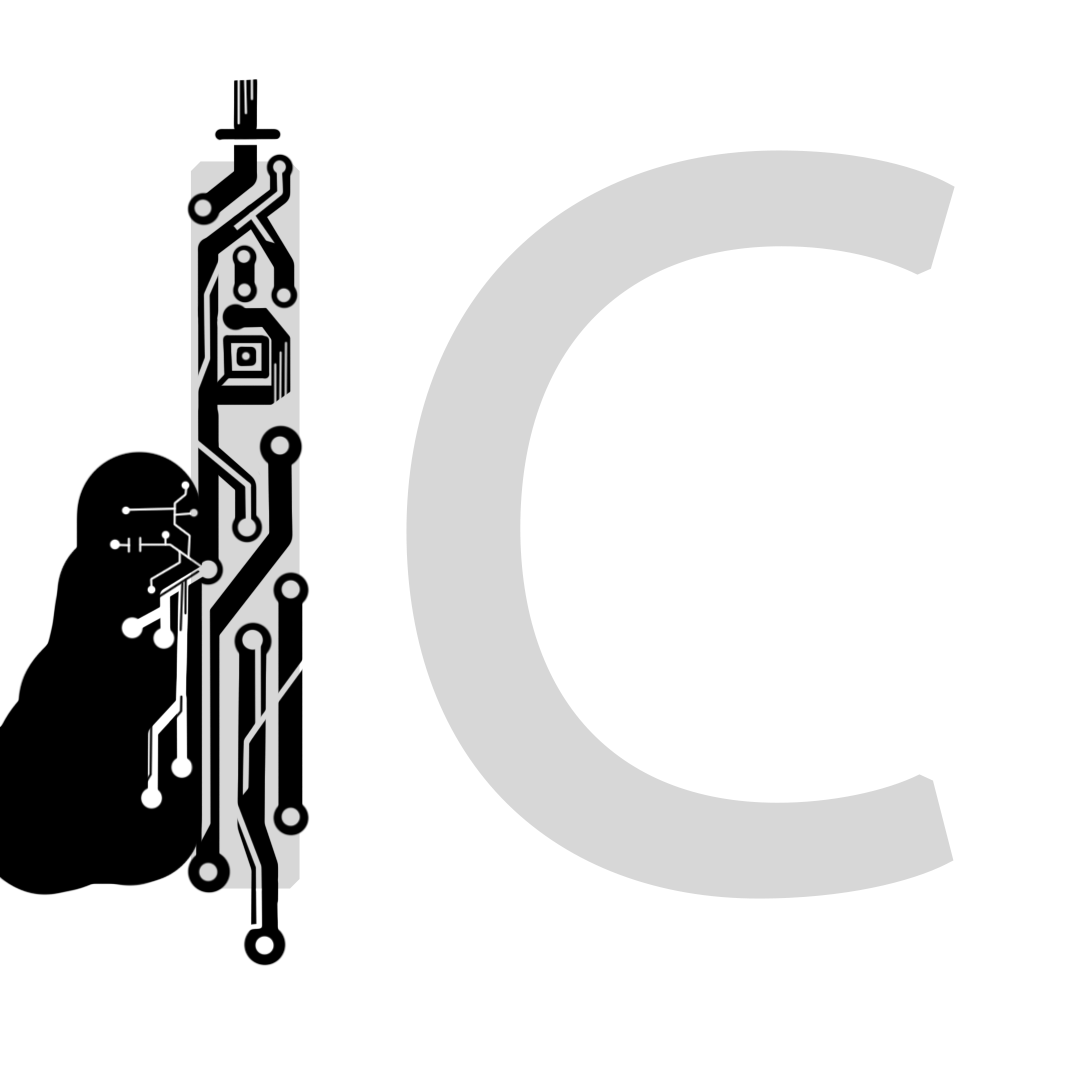
<style>
.page{position:relative;width:1080px;height:1080px;background:#ffffff}
.page>*{position:absolute;margin:0}
.t1{font:1050.4px "MyriadPro-Regular";letter-spacing:-0.016em;color:#d7d7d7;font-weight:bold}
</style>
<div class="page">
<p class="t1" style="left:190px;top:150px;width:765px;height:749px">IC</p>
</div>
